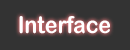
<style>
.page{position:relative;width:130px;height:50px;background:#333333}
.page>*{position:absolute;margin:0}
.t1{font:23.5px "ArialRoundedMTBold";color:#ffffff;scale:0.9 1}
</style>
<div class="page">
<p class="t1" style="left:19px;top:16px;width:91px;height:18px">Interface</p>
</div>
